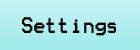
<style>
.page{position:relative;width:140px;height:50px}
.page>*{position:absolute;margin:0}
.t1{font:18px "Terminal";color:#000000;scale:0.91 1}
</style>
<div class="page">
<p class="t1" style="left:21px;top:17px;width:96px;height:19px">Settings</p>
</div>
